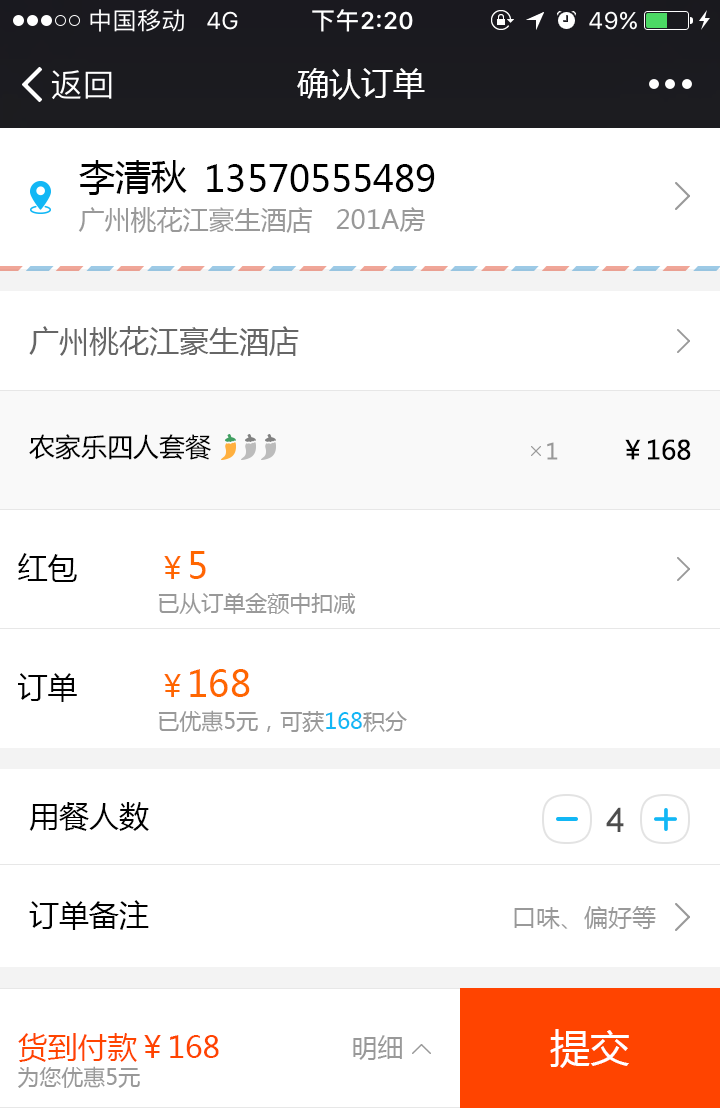
<style>
.page{position:relative;width:720px;height:1108px;background:#ffffff}
.page>*{position:absolute;margin:0}
.t1{font:32px "MicrosoftYaHei";color:#ffffff}
.t2{font:36px "MicrosoftYaHei";color:#000000}
.t3{font:26px "MicrosoftYaHei";color:#999999}
.t4{font:30px "MicrosoftYaHei";color:#666666}
.t5{font:26px "MicrosoftYaHei";color:#000000}
.t6{font:22px "MicrosoftYaHei";color:#999999}
.t7{font:30px "MicrosoftYaHei";color:#000000}
.t8{font:22px/44px "MicrosoftYaHei";color:#999999}
.t9{font:30px/44px "MicrosoftYaHei";color:#ff6600}
.t10{font:36px/44px "MicrosoftYaHei";color:#ff6600}
.t11{font:22px/44px "MicrosoftYaHei";color:#12b7f5}
.t12{font:34px "ArialMT";color:#4d4d4d}
.t13{font:24px "MicrosoftYaHei";color:#999999}
.t14{font:30px/34px "MicrosoftYaHei";color:#ff4400}
.t15{font:22px/34px "MicrosoftYaHei";color:#999999}
.t16{font:40px "MicrosoftYaHei";color:#ffffff}
</style>
<div class="page">
<p class="t1" style="left:297px;top:68px;width:128px;height:32px">确认订单</p>
<p class="t2" style="left:79px;top:160px;width:108px;height:35px">李清秋</p>
<p class="t2" style="left:207px;top:164px;width:228px;height:28px">13570555489</p>
<p class="t3" style="left:78px;top:207px;width:347px;height:26px">广州桃花江豪生酒店   201A房</p>
<p class="t4" style="left:29px;top:326px;width:270px;height:30px">广州桃花江豪生酒店</p>
<p class="t5" style="left:29px;top:434px;width:182px;height:26px">农家乐四人套餐</p>
<p class="t6" style="left:547px;top:442px;width:11px;height:18px">1</p>
<p class="t5" style="left:625px;top:439px;width:66px;height:21px">￥168</p>
<p class="t7" style="left:18px;top:553px;width:59px;height:29px">红包</p>
<p class="t8" style="left:158px;top:551px;width:198px;height:63px"><span class="t9">￥</span><span class="t10">5<br></span>已从订单金额中扣减</p>
<p class="t7" style="left:18px;top:673px;width:59px;height:29px">订单</p>
<p class="t8" style="left:158px;top:669px;width:249px;height:63px"><span class="t9">￥</span><span class="t10">168<br></span>已优惠5元，可获<span class="t11">168</span>积分</p>
<p class="t7" style="left:29px;top:802px;width:120px;height:29px">用餐人数</p>
<p class="t12" style="left:606px;top:807px;width:18px;height:25px">4</p>
<p class="t7" style="left:29px;top:900px;width:120px;height:30px">订单备注</p>
<p class="t13" style="left:514px;top:906px;width:142px;height:23px">口味、偏好等</p>
<p class="t14" style="left:18px;top:1033px;width:201px;height:55px">货到付款￥168<br><span class="t15">为您优惠5元</span></p>
<p class="t3" style="left:353px;top:1035px;width:49px;height:25px">明细</p>
<p class="t16" style="left:550px;top:1029px;width:79px;height:39px">提交</p>
</div>
